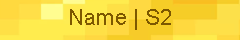
<style>
.page{position:relative;width:240px;height:40px}
.page>*{position:absolute;margin:0}
.t1{font:22px "ArialMT";color:#7d5800}
</style>
<div class="page">
<p class="t1" style="left:70px;top:9px;width:101px;height:21px">Name | S2</p>
</div>
